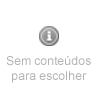
<style>
.page{position:relative;width:100px;height:100px;background:#ffffff}
.page>*{position:absolute;margin:0}
.t1{font:12px/10px "ArialMT";color:#b3b3b3}
</style>
<div class="page">
<p class="t1" style="left:6px;top:56px;width:85px;height:27px;text-align:center">Sem conteúdos<br>para escolher</p>
</div>
